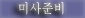
<style>
.page{position:relative;width:85px;height:18px}
.page>*{position:absolute;margin:0}
.t1{font:13.2px "BatangChe";color:#ffffff;scale:0.91 1}
</style>
<div class="page">
<p class="t1" style="left:18px;top:2px;width:46px;height:13px">미사준비</p>
</div>
